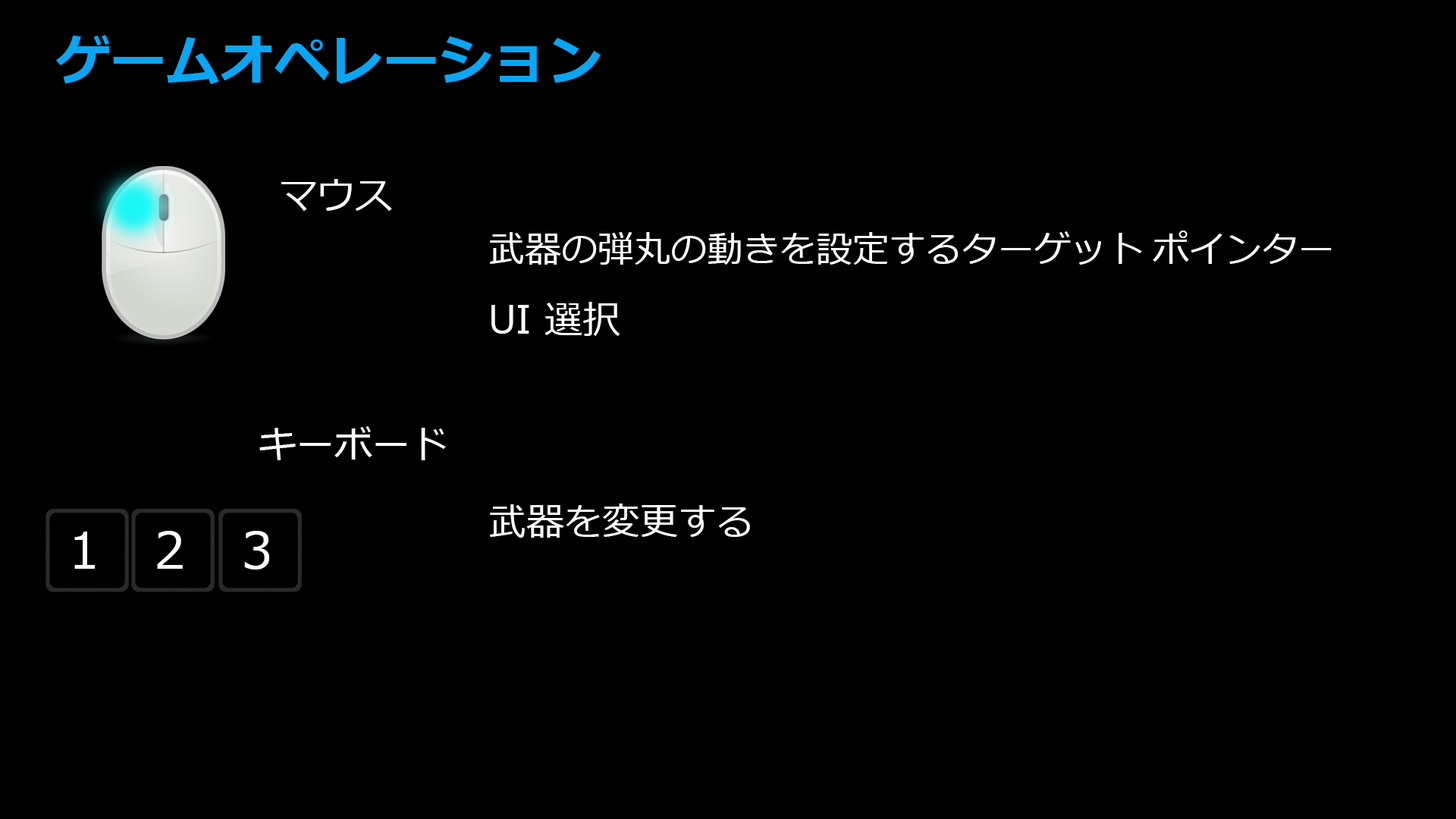
<style>
.page{position:relative;width:1456px;height:819px;background:#000000}
.page>*{position:absolute;margin:0}
.t1{font:54.6px "Meiryo-Bold";color:#0ba5f2}
.t2{font:37.9px "Meiryo";color:#ffffff}
.t3{font:36.4px "Meiryo";color:#ffffff}
.t4{font:51.1px "Meiryo";color:#ffffff}
</style>
<div class="page">
<p class="t1" style="left:56px;top:35px;width:545px;height:49px">ゲームオペレーション</p>
<p class="t2" style="left:281px;top:179px;width:111px;height:32px">マウス</p>
<p class="t3" style="left:490px;top:231px;width:842px;height:34px">武器の弾丸の動きを設定するターゲット ポインター</p>
<p class="t2" style="left:491px;top:302px;width:129px;height:34px">UI 選択</p>
<p class="t2" style="left:259px;top:426px;width:187px;height:34px">キーボード</p>
<p class="t2" style="left:490px;top:504px;width:260px;height:34px">武器を変更する</p>
<p class="t4" style="left:74px;top:532px;width:21px;height:37px">1</p>
<p class="t4" style="left:157px;top:531px;width:26px;height:38px">2</p>
<p class="t4" style="left:244px;top:531px;width:25px;height:39px">3</p>
</div>
